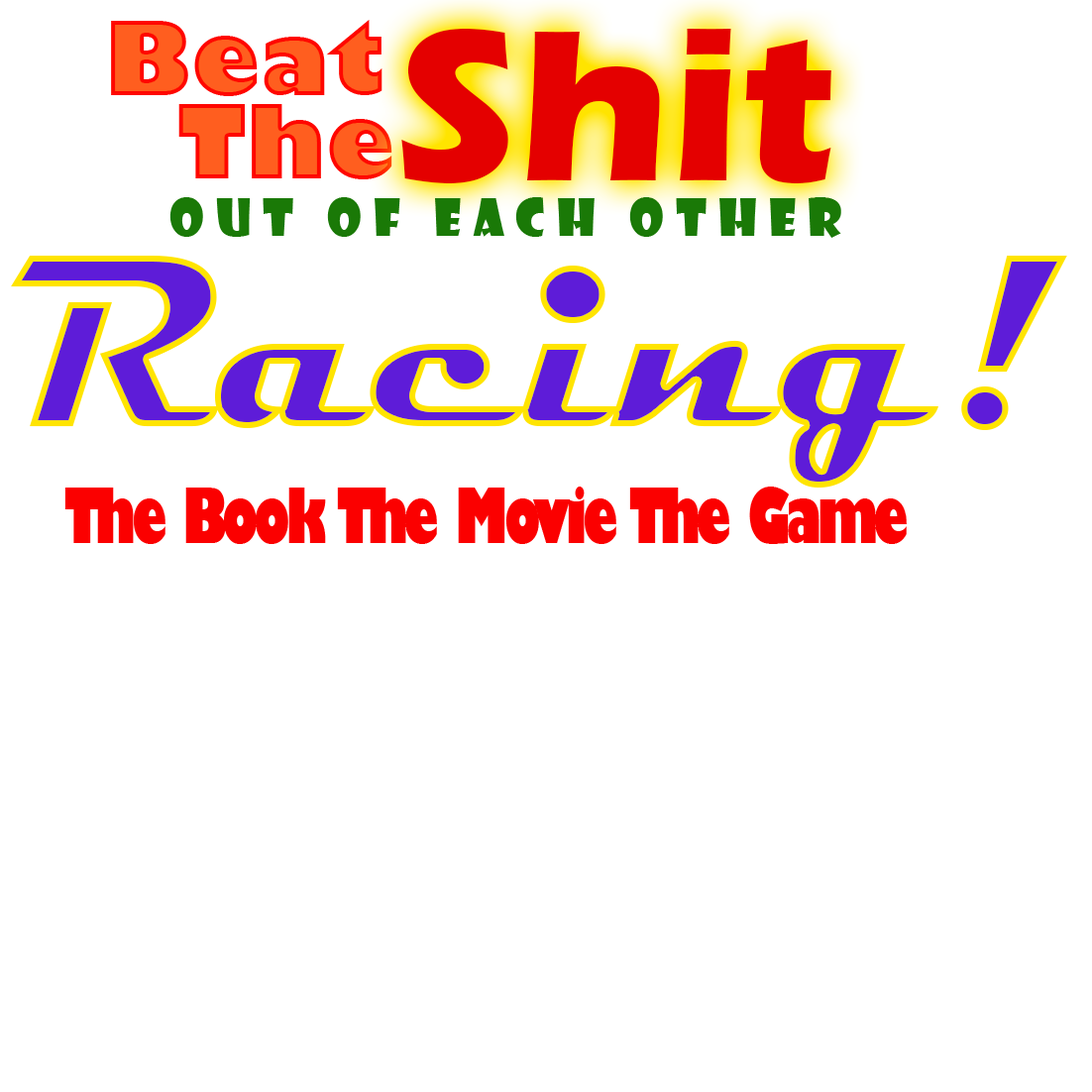
<style>
.page{position:relative;width:1092px;height:1092px;background:#ffffff}
.page>*{position:absolute;margin:0}
.t1{font:99.1px "GillSans-UltraBold";color:#ff5e1f}
.t2{font:223px "ErasITC-Bold";color:#e40000}
.t3{font:49.5px "ShowcardGothic-Reg";letter-spacing:0.24em;color:#1a7907}
.t4{font:247.7px "Magneto-Bold"}
.t5{font:74.3px "GillSans-UltraBoldCondensed";letter-spacing:-0.06em;color:#fb0000}
</style>
<div class="page">
<p class="t1" style="left:111px;top:20px;width:271px;height:76px">Beat</p>
<p class="t2" style="left:401px;top:29px;width:430px;height:154px">Shit</p>
<p class="t1" style="left:178px;top:104px;width:214px;height:75px">The</p>
<p class="t3" style="left:169px;top:197px;width:672px;height:41px">Out Of Each Other</p>
<p class="t4" style="left:11px;top:256px;width:1056px;height:232px">Racing!</p>
<p class="t5" style="left:64px;top:487px;width:843px;height:57px">The Book The Movie The Game</p>
</div>
